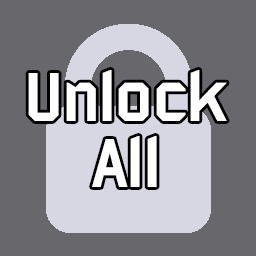
<style>
.page{position:relative;width:256px;height:256px;background:#67676c}
.page>*{position:absolute;margin:0}
.t1{font:75px/66.7px "Bombardier";color:#ffffff}
</style>
<div class="page">
<p class="t1" style="left:28px;top:70px;width:199px;height:117px;text-align:center">Unlock<br>All</p>
</div>
